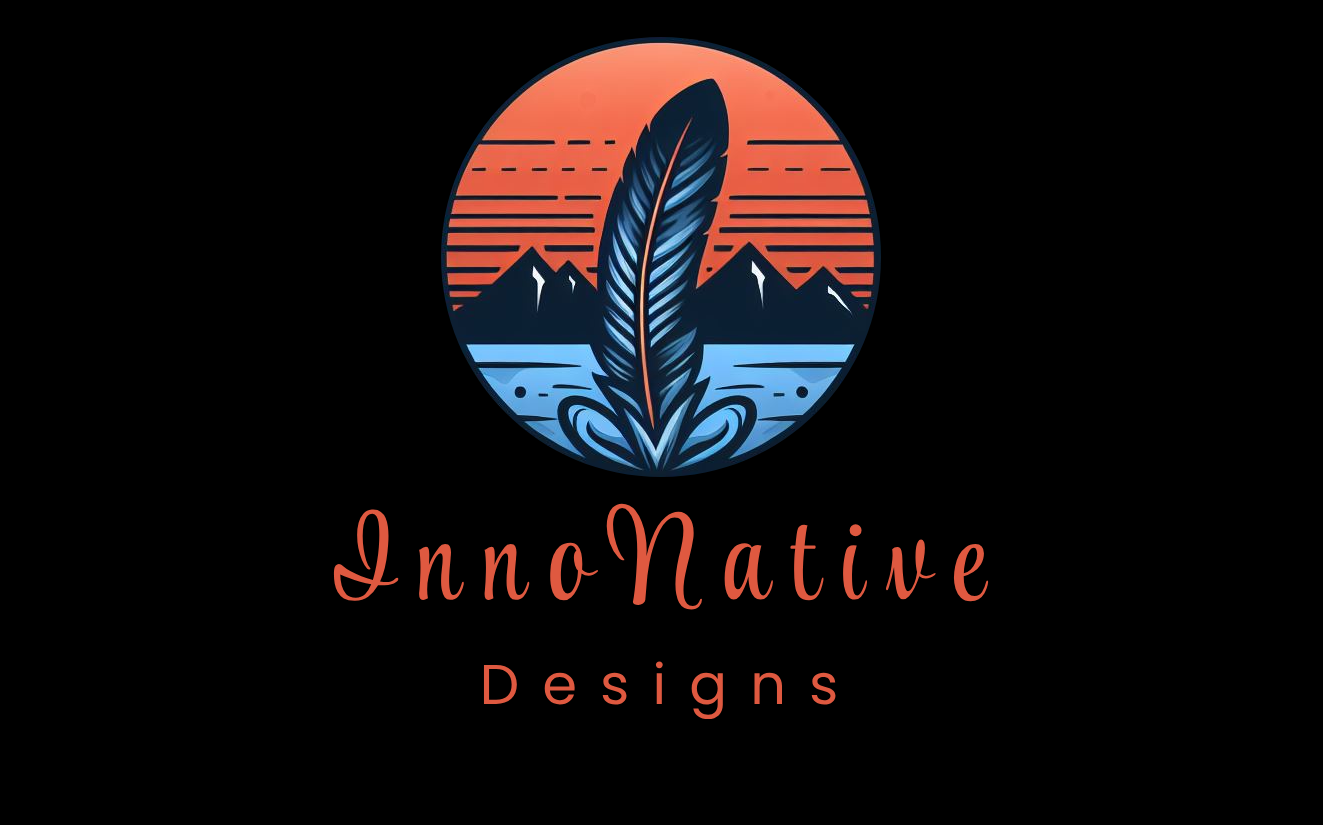
<style>
.page{position:relative;width:1323px;height:825px;background:#000000}
.page>*{position:absolute;margin:0}
.t1{font:124px "StyleScript-Regular";letter-spacing:0.183em;color:#df5940}
.t2{font:56px/105px "Poppins-Regular";letter-spacing:0.412em;color:#df5940}
</style>
<div class="page">
<p class="t1" style="left:333px;top:503px;width:656px;height:217px;text-align:center">InnoNative<br><span class="t2">Designs</span></p>
</div>
